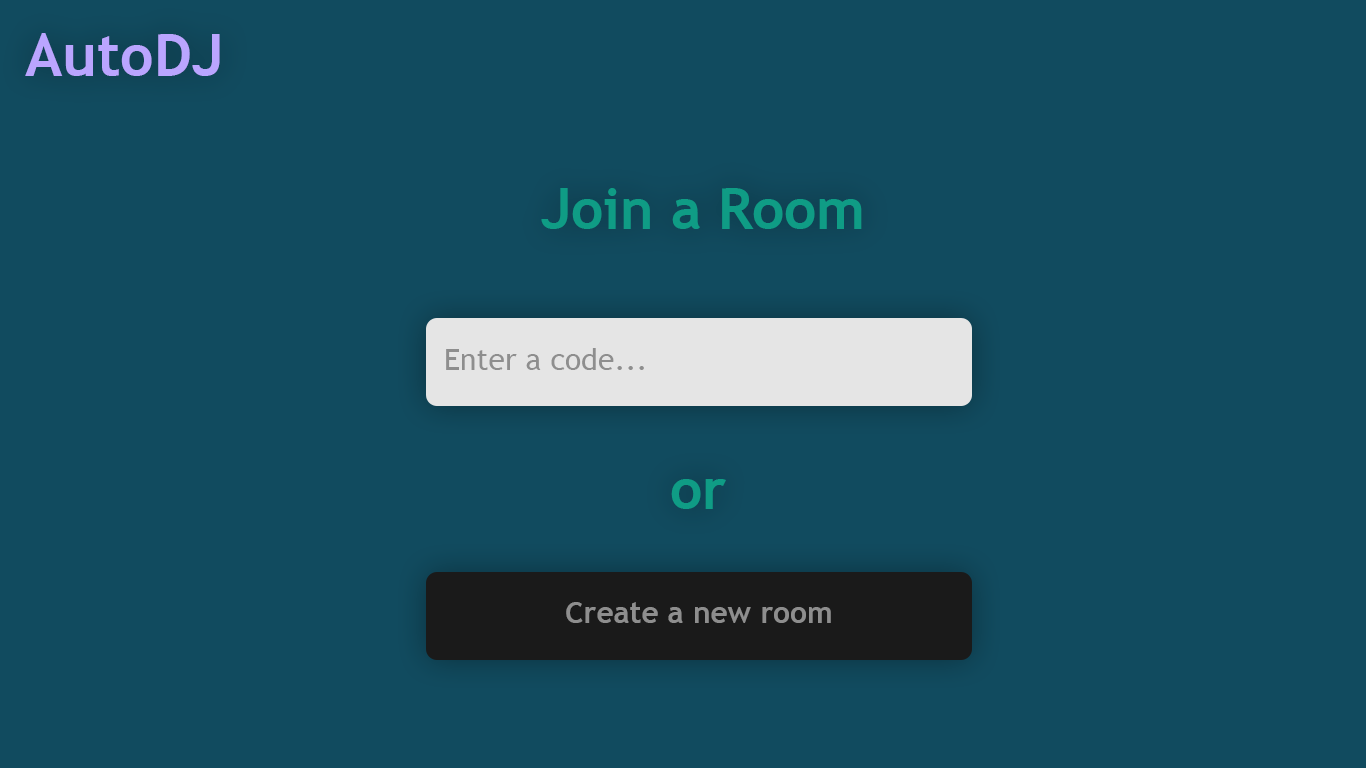
<style>
.page{position:relative;width:1366px;height:768px;background:#114b5f}
.page>*{position:absolute;margin:0}
.t1{font:58.9px "TrebuchetMS-Bold";color:#baa5ff}
.t2{font:56.5px "TrebuchetMS-Bold";color:#0f9c85}
.t3{font:30px "TrebuchetMS";color:#8e8e8e}
.t4{font:30px "TrebuchetMS-Bold";color:#8e8e8e}
</style>
<div class="page">
<p class="t1" style="left:25px;top:33px;width:195px;height:43px">AutoDJ</p>
<p class="t2" style="left:541px;top:188px;width:321px;height:41px">Join a Room</p>
<p class="t3" style="left:446px;top:348px;width:198px;height:22px">Enter a code...</p>
<p class="t2" style="left:671px;top:479px;width:55px;height:30px">or</p>
<p class="t4" style="left:566px;top:602px;width:265px;height:21px">Create a new room</p>
</div>
